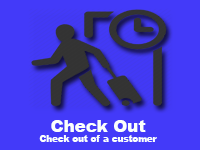
<style>
.page{position:relative;width:200px;height:150px;background:#433af9}
.page>*{position:absolute;margin:0}
.t1{font:8.7px "Arial-Black";color:#fbfffc}
.t2{font:16.7px "Arial-Black";color:#fbfffc}
</style>
<div class="page">
<p class="t1" style="left:39px;top:120px;width:118px;height:22px;text-align:center"><span class="t2">Check Out<br></span>Check out of a customer</p>
</div>
